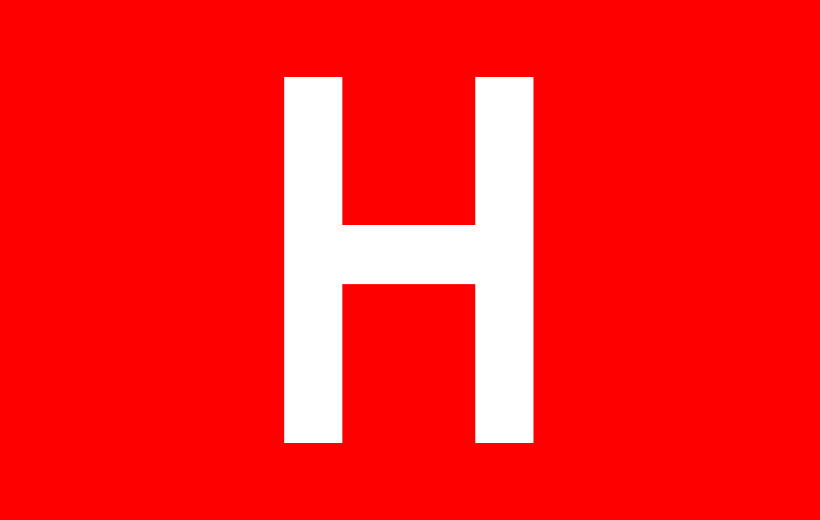
<style>
.page{position:relative;width:820px;height:520px;background:#ff0000}
.page>*{position:absolute;margin:0}
.t1{font:545.8px "HighwayGothic";color:#ffffff}
</style>
<div class="page">
<p class="t1" style="left:284px;top:77px;width:250px;height:366px">H</p>
</div>
